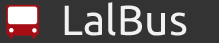
<style>
.page{position:relative;width:219px;height:43px;background:#333333}
.page>*{position:absolute;margin:0}
.t1{font:42.3px "Ubuntu";color:#f1f1f1}
</style>
<div class="page">
<p class="t1" style="left:64px;top:2px;width:123px;height:34px">LalBus</p>
</div>
